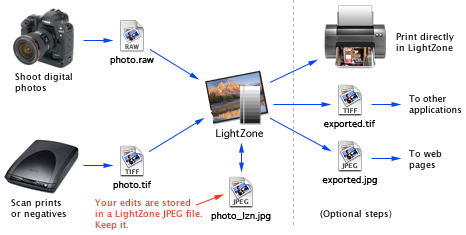
<style>
.page{position:relative;width:466px;height:235px;background:#ffffff}
.page>*{position:absolute;margin:0}
.t1{font:9px "LucidaGrande";color:#000000}
.t2{font:9px "Geneva";color:#000000}
.t3{font:10px "Geneva";color:#000000}
.t4{font:9px "LucidaGrande";color:#ee3312}
</style>
<div class="page">
<p class="t1" style="left:396px;top:33px;width:58px;height:20px">Print directly<br>in LightZone</p>
<p class="t2" style="left:110px;top:56px;width:44px;height:9px">photo.raw</p>
<p class="t1" style="left:15px;top:73px;width:57px;height:20px">Shoot digital<br>photos</p>
<p class="t1" style="left:409px;top:95px;width:52px;height:20px">To other<br>applications</p>
<p class="t2" style="left:324px;top:120px;width:51px;height:9px">exported.tif</p>
<p class="t3" style="left:216px;top:129px;width:47px;height:10px">LightZone</p>
<p class="t1" style="left:409px;top:150px;width:33px;height:20px">To web<br>pages</p>
<p class="t2" style="left:113px;top:181px;width:38px;height:9px">photo.tif</p>
<p class="t2" style="left:322px;top:176px;width:55px;height:9px">exported.jpg</p>
<p class="t1" style="left:11px;top:199px;width:55px;height:20px">Scan prints<br>or negatives</p>
<p class="t4" style="left:95px;top:199px;width:107px;height:31px">Your edits are stored<br>in a LightZone JPEG file.<br>Keep it.</p>
<p class="t2" style="left:211px;top:212px;width:60px;height:9px">photo_lzn.jpg</p>
<p class="t1" style="left:320px;top:210px;width:72px;height:9px">(Optional steps)</p>
</div>
